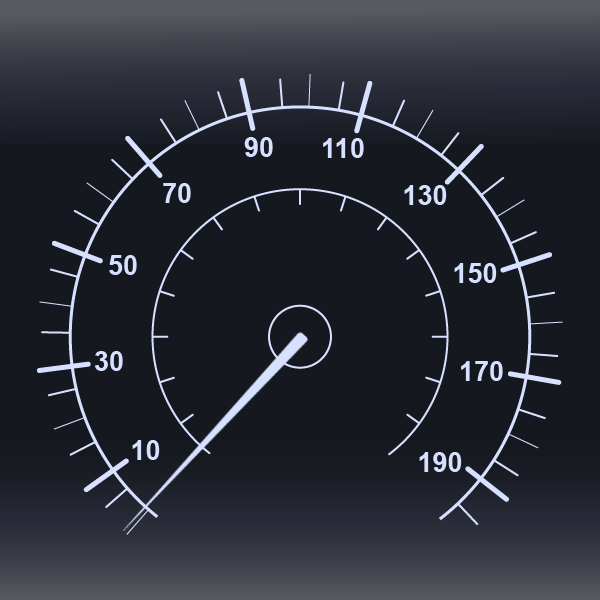
<style>
.page{position:relative;width:600px;height:600px;background:#16181f}
.page>*{position:absolute;margin:0}
.t1{font:27px "Arial-BoldMT";color:#d6e0ff}
</style>
<div class="page">
<p class="t1" style="left:244px;top:137px;width:29px;height:20px">90</p>
<p class="t1" style="left:323px;top:138px;width:41px;height:20px">110</p>
<p class="t1" style="left:163px;top:183px;width:28px;height:20px">70</p>
<p class="t1" style="left:404px;top:185px;width:43px;height:20px">130</p>
<p class="t1" style="left:109px;top:255px;width:28px;height:20px">50</p>
<p class="t1" style="left:454px;top:263px;width:43px;height:20px">150</p>
<p class="t1" style="left:94px;top:351px;width:29px;height:20px">30</p>
<p class="t1" style="left:461px;top:361px;width:42px;height:20px">170</p>
<p class="t1" style="left:132px;top:440px;width:28px;height:20px">10</p>
<p class="t1" style="left:419px;top:452px;width:43px;height:20px">190</p>
</div>
